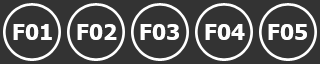
<style>
.page{position:relative;width:320px;height:64px;background:#333333}
.page>*{position:absolute;margin:0}
.t1{font:22px "Tahoma-Bold";color:#ffffff}
</style>
<div class="page">
<p class="t1" style="left:13px;top:24px;width:39px;height:16px">F01</p>
<p class="t1" style="left:77px;top:24px;width:40px;height:16px">F02</p>
<p class="t1" style="left:140px;top:24px;width:39px;height:16px">F03</p>
<p class="t1" style="left:205px;top:24px;width:40px;height:16px">F04</p>
<p class="t1" style="left:268px;top:24px;width:39px;height:16px">F05</p>
</div>
